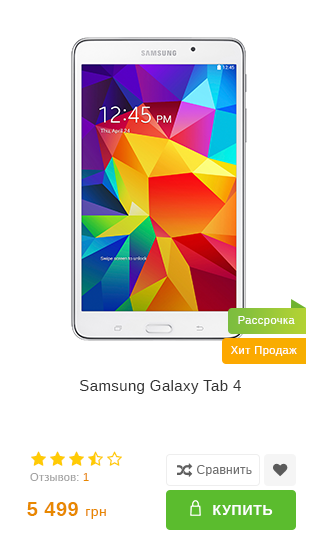
<style>
.page{position:relative;width:320px;height:550px;background:#ffffff}
.page>*{position:absolute;margin:0}
.t1{font:11px "Arimo";letter-spacing:0.045em;color:#ffffff}
.t2{font:15px "Arimo";letter-spacing:0.025em;color:#333333}
.t3{font:11px "Arimo";letter-spacing:0.025em;color:#a3a3a3}
.t4{font:11px "Arimo";letter-spacing:0.025em;color:#e88800}
.t5{font:12px "Arimo";letter-spacing:0.025em;color:#707070}
.t6{font:20px "Arimo-Bold";letter-spacing:0.025em;color:#e88800}
.t7{font:14px "Arimo";letter-spacing:0.025em;color:#e88800}
.t8{font:14px "Arimo-Bold";letter-spacing:0.05em;color:#ffffff}
</style>
<div class="page">
<p class="t1" style="left:238px;top:316px;width:57px;height:10px">Рассрочка</p>
<p class="t1" style="left:231px;top:346px;width:66px;height:10px">Хит Продаж</p>
<p class="t2" style="left:80px;top:380px;width:161px;height:14px">Samsung Galaxy Tab 4</p>
<p class="t3" style="left:30px;top:473px;width:59px;height:8px">Отзывов: <span class="t4">1</span></p>
<p class="t5" style="left:197px;top:465px;width:55px;height:11px">Сравнить</p>
<p class="t6" style="left:27px;top:502px;width:79px;height:17px">5 499 <span class="t7">грн</span></p>
<p class="t8" style="left:213px;top:505px;width:60px;height:10px">КУПИТЬ</p>
</div>
